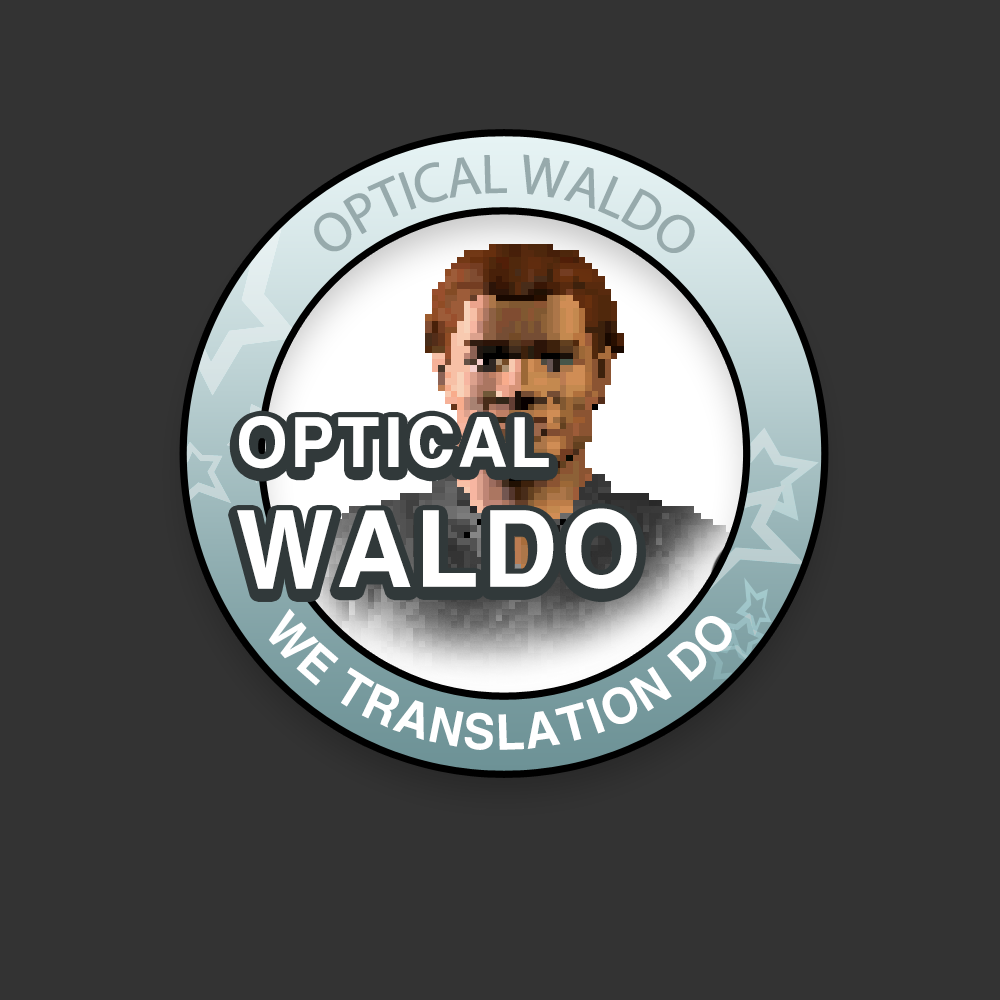
<style>
.page{position:relative;width:1000px;height:1000px;background:#333333}
.page>*{position:absolute;margin:0}
.t1{font:65px "H2gtrE";color:#ffffff}
.t2{font:100px "H2gtrE";color:#ffffff}
.t3{font:46px "H2gtrE";color:#ffffff}
</style>
<div class="page">
<p class="t1" style="left:237px;top:416px;width:400px;height:173px">OPTICAL<span class="t2"> <br>WALDO</span></p>
<p class="t3" style="left:268px;top:608px;width:464px;height:142px;text-align:center">WE TRANSLATION DO</p>
</div>
